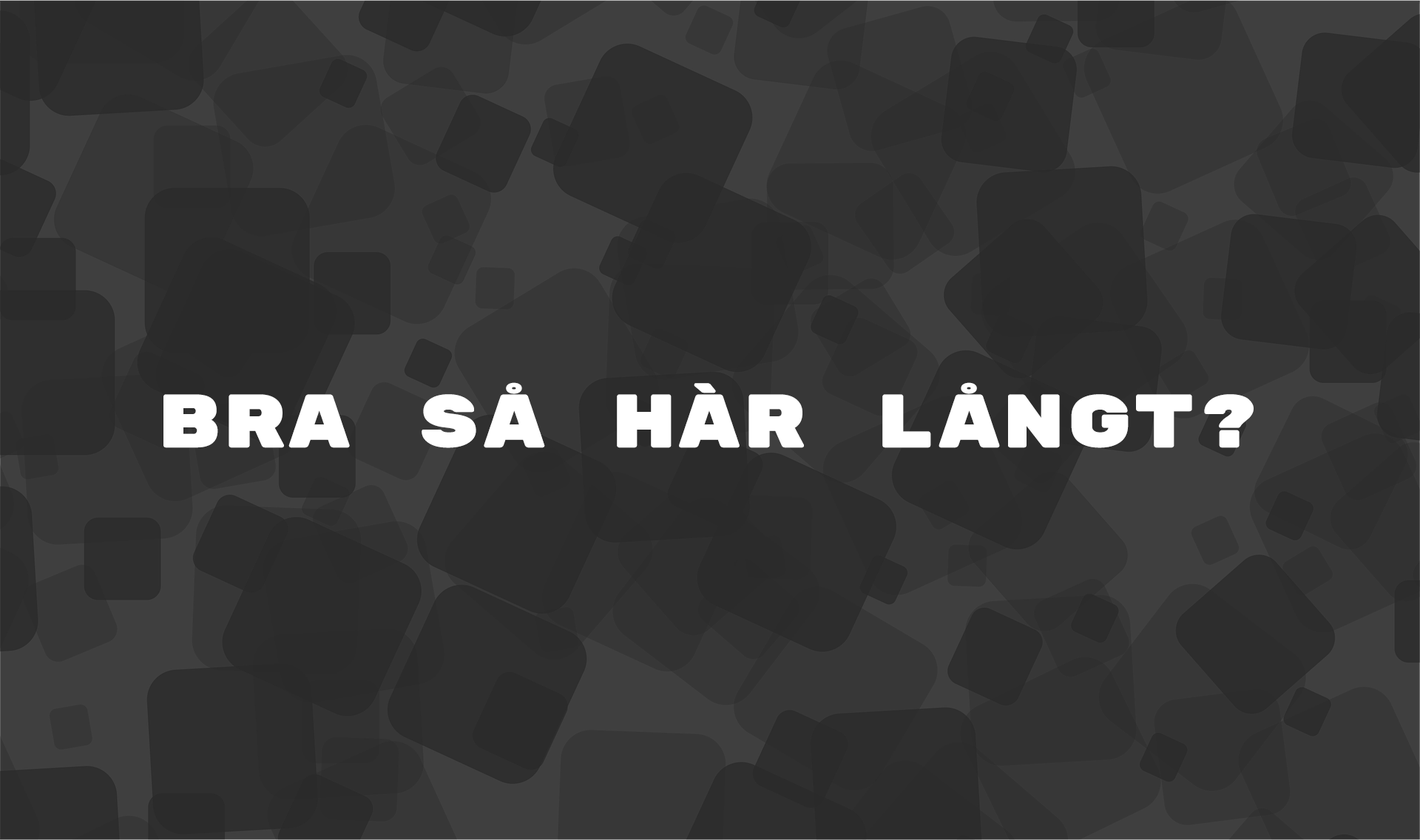
<style>
.page{position:relative;width:1420px;height:840px;background:#373737}
.page>*{position:absolute;margin:0}
.t1{font:74.7px "RubikMonoOne-Regular";color:#ffffff;font-weight:bold}
</style>
<div class="page">
<p class="t1" style="left:163px;top:382px;width:1090px;height:66px">BRA SÅ HÄR LÅNGT?</p>
</div>
